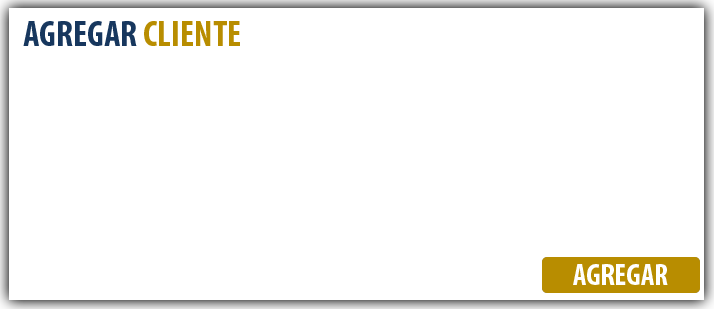
<style>
.page{position:relative;width:714px;height:309px;background:#ffffff}
.page>*{position:absolute;margin:0}
.t1{font:36px "MyriadPro-BoldCond";color:#17375e}
.t2{font:36px "MyriadPro-BoldCond";color:#b88d00}
.t3{font:30px "MyriadPro-BoldCond";color:#ffffff}
</style>
<div class="page">
<p class="t1" style="left:23px;top:21px;width:217px;height:25px">AGREGAR <span class="t2">CLIENTE</span></p>
<p class="t3" style="left:573px;top:264px;width:95px;height:21px">AGREGAR</p>
<p class="t3" style="left:573px;top:264px;width:95px;height:21px">AGREGAR</p>
</div>
